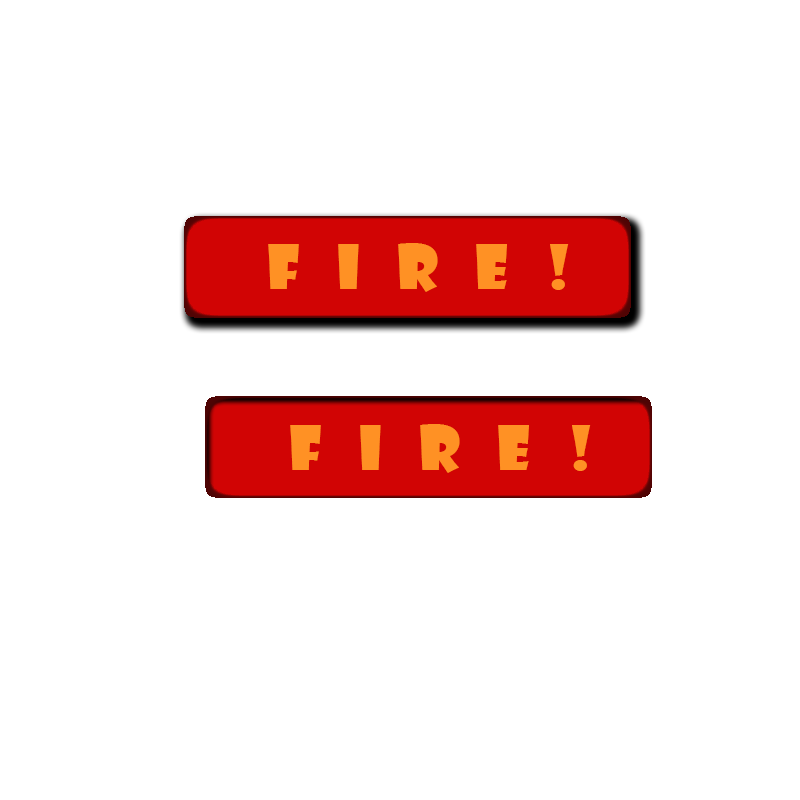
<style>
.page{position:relative;width:800px;height:800px;background:#ffffff}
.page>*{position:absolute;margin:0}
.t1{font:60px "ShowcardGothic-Reg";letter-spacing:0.62em;color:#ff9124}
</style>
<div class="page">
<p class="t1" style="left:268px;top:243px;width:301px;height:49px">Fire!</p>
<p class="t1" style="left:290px;top:424px;width:301px;height:49px">Fire!</p>
</div>
